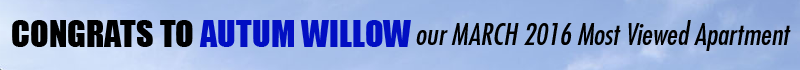
<style>
.page{position:relative;width:800px;height:70px}
.page>*{position:absolute;margin:0}
.t1{font:34.3px "Impact";color:#020fc3}
.t2{font:34.3px "Impact";color:#000000}
.t3{font:29.3px "Futura-CondensedOblique";color:#000000}
</style>
<div class="page">
<p class="t1" style="left:12px;top:20px;width:399px;height:27px"><span class="t2">CONGRATS TO </span>AUTUM WILLOW</p>
<p class="t3" style="left:416px;top:20px;width:375px;height:31px">our MARCH 2016 Most Viewed Apartment</p>
</div>
